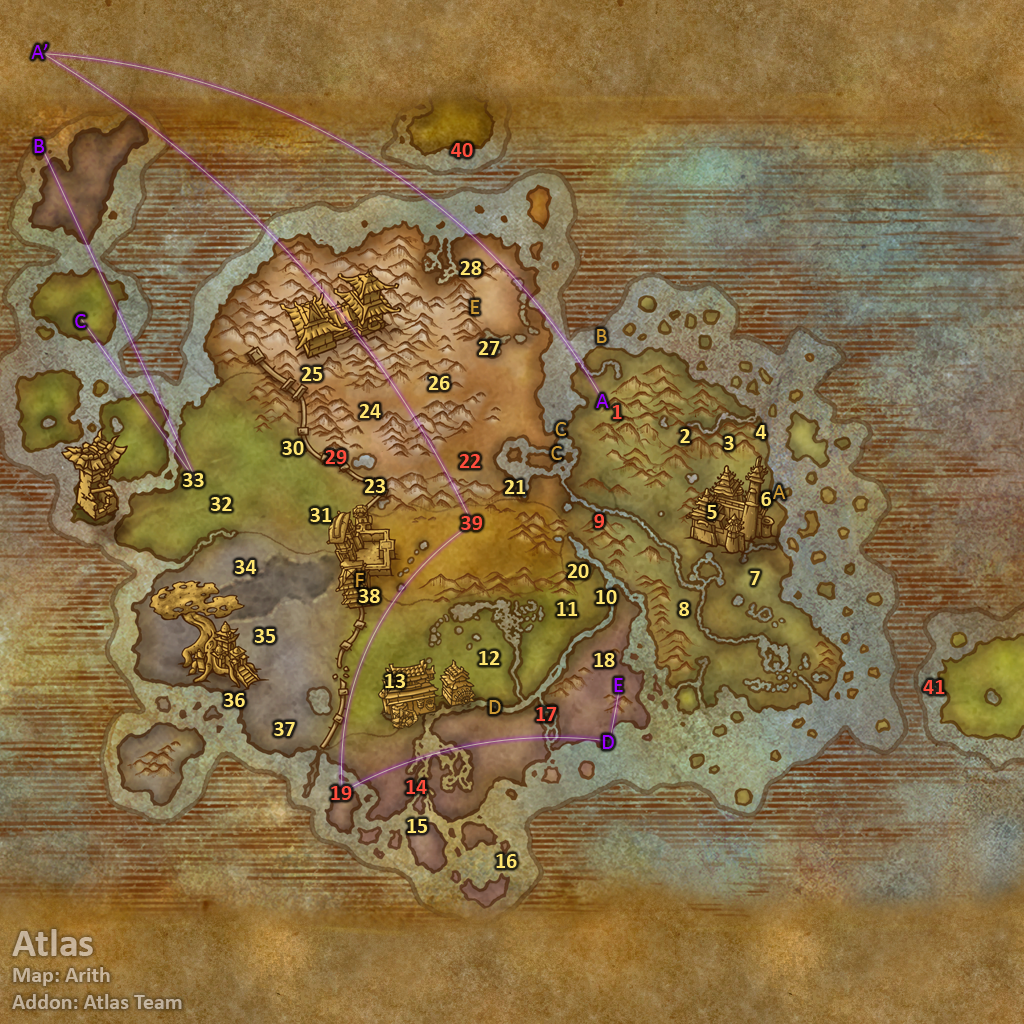
<style>
.page{position:relative;width:1024px;height:1024px}
.page>*{position:absolute;margin:0}
.t1{font:22px "Calibri";color:#9900ff}
.t2{font:22px "Calibri-Bold";color:#ff4c3c}
.t3{font:22px "Calibri-Bold";color:#fee570}
.t4{font:22px "Calibri";color:#cc9933}
.t5{font:22px "Calibri-Bold";color:#c4b39b}
.t6{font:40px "Calibri-Bold";color:#c4b39b}
</style>
<div class="page">
<p class="t1" style="left:31px;top:44px;width:17px;height:15px">A’</p>
<p class="t1" style="left:34px;top:139px;width:11px;height:14px">B</p>
<p class="t2" style="left:451px;top:143px;width:22px;height:14px">40</p>
<p class="t3" style="left:460px;top:261px;width:22px;height:14px">28</p>
<p class="t4" style="left:471px;top:300px;width:9px;height:14px">E</p>
<p class="t1" style="left:75px;top:314px;width:11px;height:14px">C</p>
<p class="t4" style="left:597px;top:329px;width:10px;height:14px">B</p>
<p class="t3" style="left:479px;top:341px;width:21px;height:14px">27</p>
<p class="t3" style="left:302px;top:367px;width:21px;height:14px">25</p>
<p class="t3" style="left:429px;top:376px;width:21px;height:14px">26</p>
<p class="t1" style="left:596px;top:394px;width:13px;height:14px">A</p>
<p class="t3" style="left:360px;top:404px;width:21px;height:14px">24</p>
<p class="t2" style="left:613px;top:405px;width:9px;height:14px">1</p>
<p class="t4" style="left:555px;top:422px;width:11px;height:14px">C</p>
<p class="t3" style="left:755px;top:425px;width:12px;height:14px">4</p>
<p class="t3" style="left:680px;top:429px;width:10px;height:14px">2</p>
<p class="t3" style="left:724px;top:436px;width:10px;height:14px">3</p>
<p class="t3" style="left:282px;top:441px;width:22px;height:14px">30</p>
<p class="t4" style="left:551px;top:446px;width:11px;height:14px">C</p>
<p class="t2" style="left:325px;top:450px;width:22px;height:14px">29</p>
<p class="t2" style="left:460px;top:454px;width:21px;height:14px">22</p>
<p class="t3" style="left:183px;top:473px;width:21px;height:14px">33</p>
<p class="t3" style="left:365px;top:479px;width:21px;height:14px">23</p>
<p class="t3" style="left:505px;top:480px;width:21px;height:14px">21</p>
<p class="t4" style="left:773px;top:485px;width:13px;height:14px">A</p>
<p class="t3" style="left:211px;top:497px;width:21px;height:14px">32</p>
<p class="t3" style="left:761px;top:492px;width:10px;height:14px">6</p>
<p class="t3" style="left:310px;top:508px;width:22px;height:14px">31</p>
<p class="t3" style="left:707px;top:505px;width:10px;height:14px">5</p>
<p class="t2" style="left:461px;top:516px;width:21px;height:14px">39</p>
<p class="t2" style="left:594px;top:514px;width:10px;height:14px">9</p>
<p class="t3" style="left:235px;top:560px;width:22px;height:14px">34</p>
<p class="t3" style="left:568px;top:564px;width:21px;height:14px">20</p>
<p class="t4" style="left:356px;top:573px;width:8px;height:14px">F</p>
<p class="t3" style="left:750px;top:571px;width:10px;height:14px">7</p>
<p class="t3" style="left:359px;top:589px;width:21px;height:14px">38</p>
<p class="t3" style="left:596px;top:590px;width:21px;height:14px">10</p>
<p class="t3" style="left:557px;top:602px;width:21px;height:14px">11</p>
<p class="t3" style="left:679px;top:602px;width:10px;height:14px">8</p>
<p class="t3" style="left:254px;top:629px;width:22px;height:14px">35</p>
<p class="t3" style="left:479px;top:651px;width:21px;height:14px">12</p>
<p class="t3" style="left:594px;top:653px;width:21px;height:14px">18</p>
<p class="t3" style="left:385px;top:674px;width:21px;height:14px">13</p>
<p class="t1" style="left:614px;top:678px;width:9px;height:14px">E</p>
<p class="t2" style="left:923px;top:680px;width:22px;height:14px">41</p>
<p class="t3" style="left:224px;top:693px;width:21px;height:14px">36</p>
<p class="t4" style="left:489px;top:700px;width:12px;height:14px">D</p>
<p class="t2" style="left:536px;top:707px;width:21px;height:14px">17</p>
<p class="t3" style="left:274px;top:722px;width:21px;height:14px">37</p>
<p class="t1" style="left:602px;top:735px;width:12px;height:14px">D</p>
<p class="t2" style="left:406px;top:780px;width:21px;height:14px">14</p>
<p class="t2" style="left:331px;top:786px;width:21px;height:14px">19</p>
<p class="t3" style="left:407px;top:819px;width:21px;height:14px">15</p>
<p class="t3" style="left:496px;top:854px;width:21px;height:14px">16</p>
<p class="t5" style="left:12px;top:929px;width:170px;height:80px"><span class="t6">Atlas<br></span>Map: Arith<br>Addon: Atlas Team</p>
</div>
